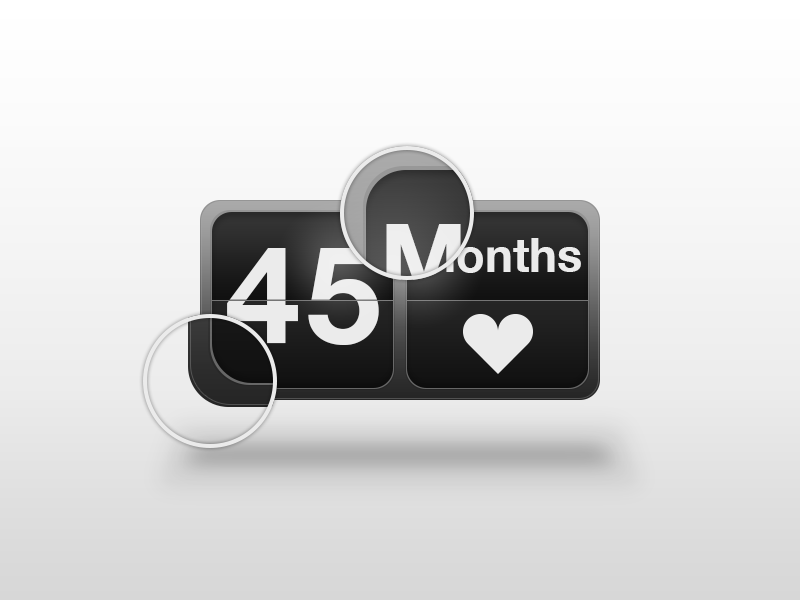
<style>
.page{position:relative;width:800px;height:600px}
.page>*{position:absolute;margin:0}
.t1{font:47px "HelveticaNeue-Bold";color:#ebebeb}
.t2{font:135px "HelveticaNeue-Bold";letter-spacing:0.05em;color:#ebebeb}
</style>
<div class="page">
<p class="t1" style="left:417px;top:238px;width:164px;height:35px">Months</p>
<p class="t2" style="left:227px;top:248px;width:152px;height:97px">45</p>
</div>
